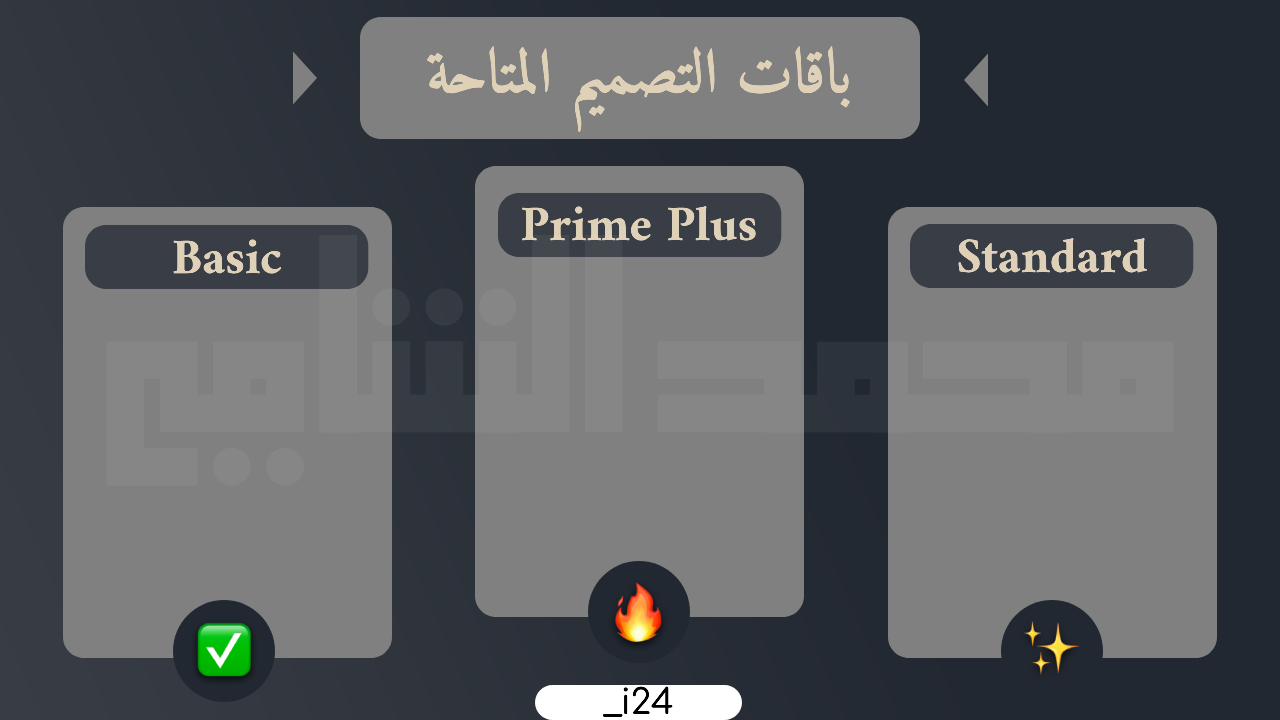
<style>
.page{position:relative;width:1280px;height:720px;background:#808080}
.page>*{position:absolute;margin:0}
.t1{font:62px "Amiri-Bold";color:#dfd0b8}
.t2{font:50px "Amiri-Bold";color:#dfd0b8}
.t3{font:35px "Comfortaa-Regular";color:#000000}
</style>
<div class="page">
<p class="t1" style="left:426px;top:45px;width:424px;height:88px">باقات التصميم المتاحة</p>
<p class="t2" style="left:522px;top:206px;width:234px;height:35px">Prime Plus</p>
<p class="t2" style="left:173px;top:239px;width:108px;height:35px">Basic</p>
<p class="t2" style="left:958px;top:238px;width:189px;height:35px">Standard</p>
<p class="t3" style="left:602px;top:686px;width:71px;height:31px">_i24</p>
</div>
